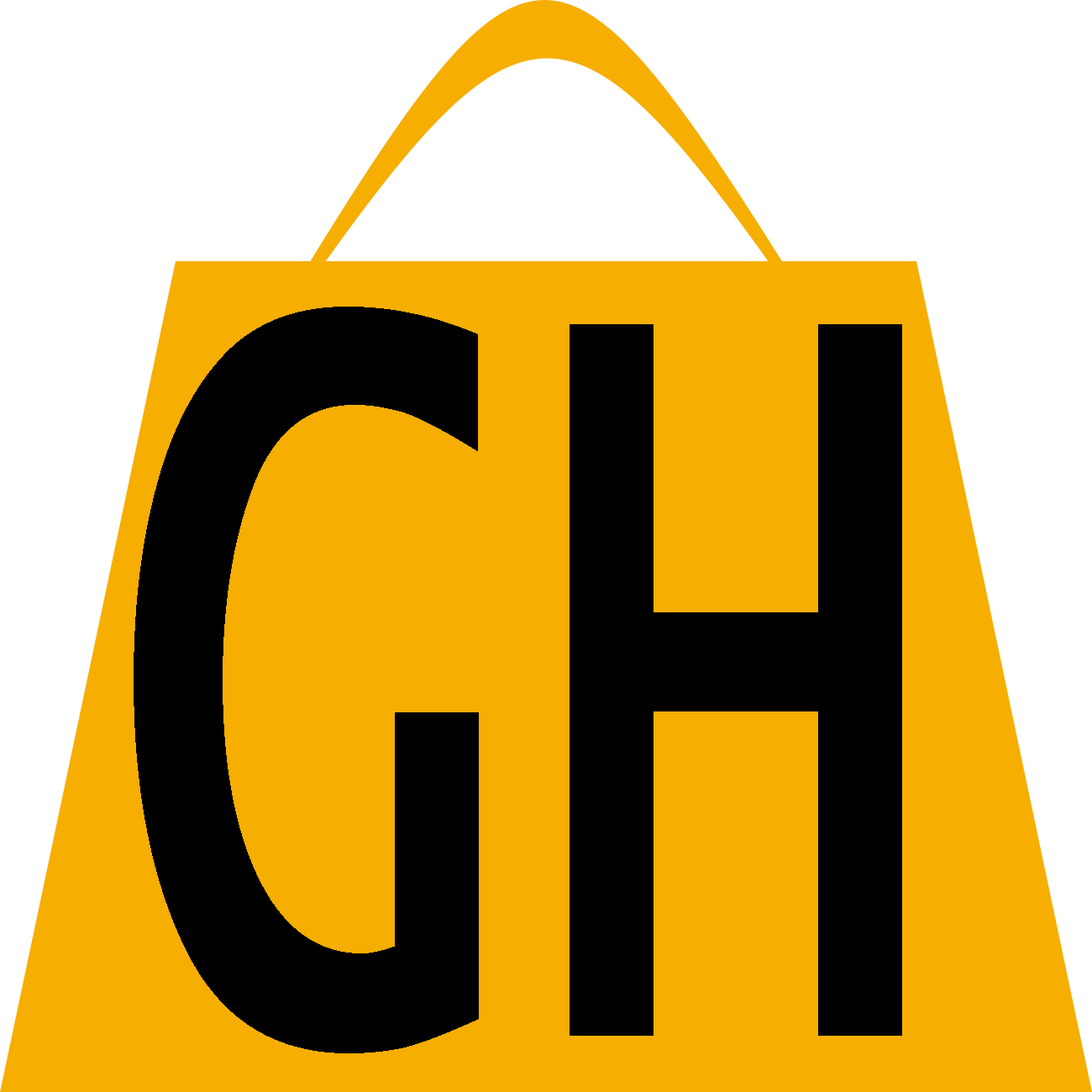
<style>
.page{position:relative;width:1092px;height:1092px;background:#f6ae01}
.page>*{position:absolute;margin:0}
.t1{font:982.7px "LucidaSans-Demi";color:#000000;scale:0.56 1}
</style>
<div class="page">
<p class="t1" style="left:134px;top:307px;width:768px;height:746px">GH</p>
</div>
